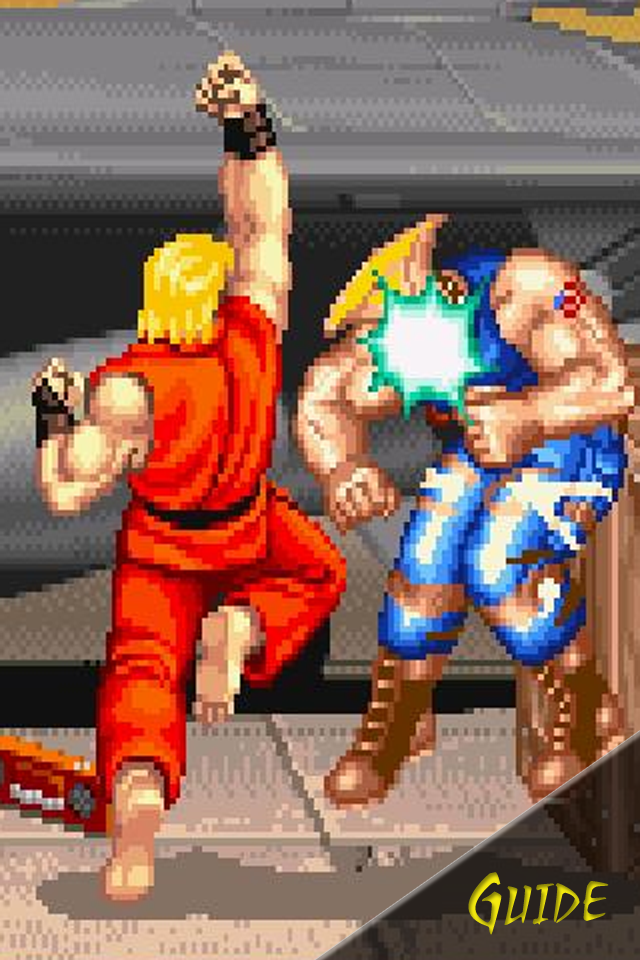
<style>
.page{position:relative;width:640px;height:960px}
.page>*{position:absolute;margin:0}
.t1{font:95px "RagingRedLotusBB-Italic";letter-spacing:-0.01em;font-variant:small-caps;font-weight:bold}
</style>
<div class="page">
<p class="t1" style="left:468px;top:872px;width:141px;height:63px;rotate:-3deg">Guide</p>
</div>
